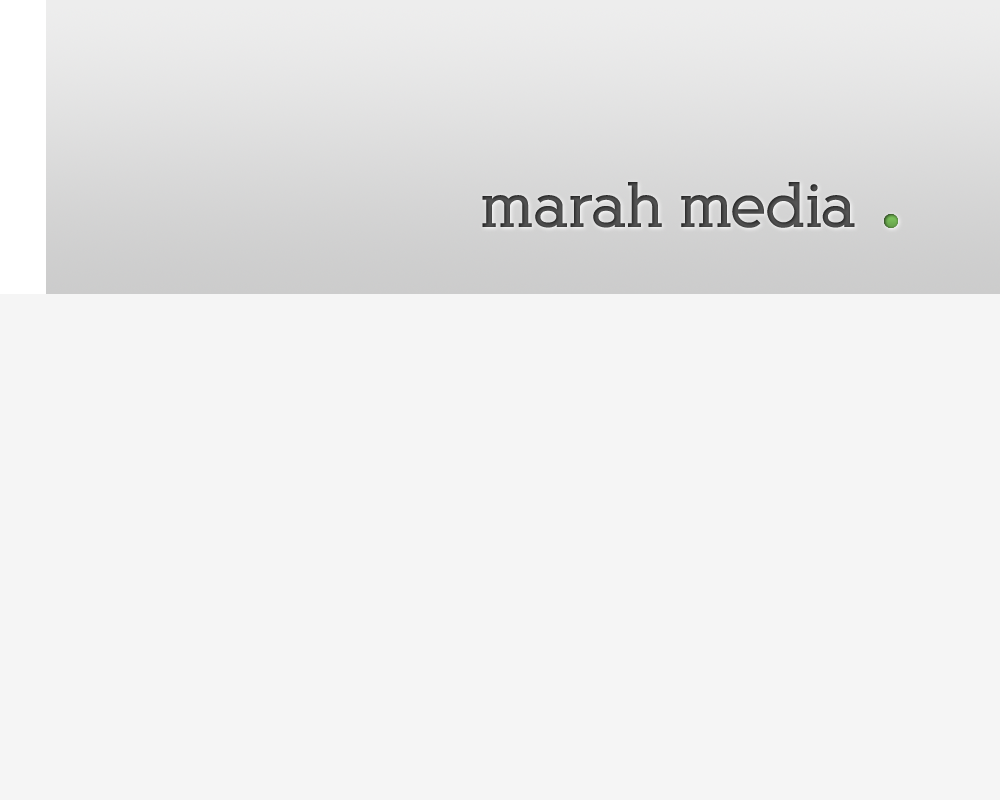
<style>
.page{position:relative;width:1000px;height:800px;background:#f5f5f5}
.page>*{position:absolute;margin:0}
.t1{font:60px "AlexandriaFLF-Bold";color:#555555}
</style>
<div class="page">
<p class="t1" style="left:482px;top:182px;width:373px;height:46px">marah media</p>
</div>
